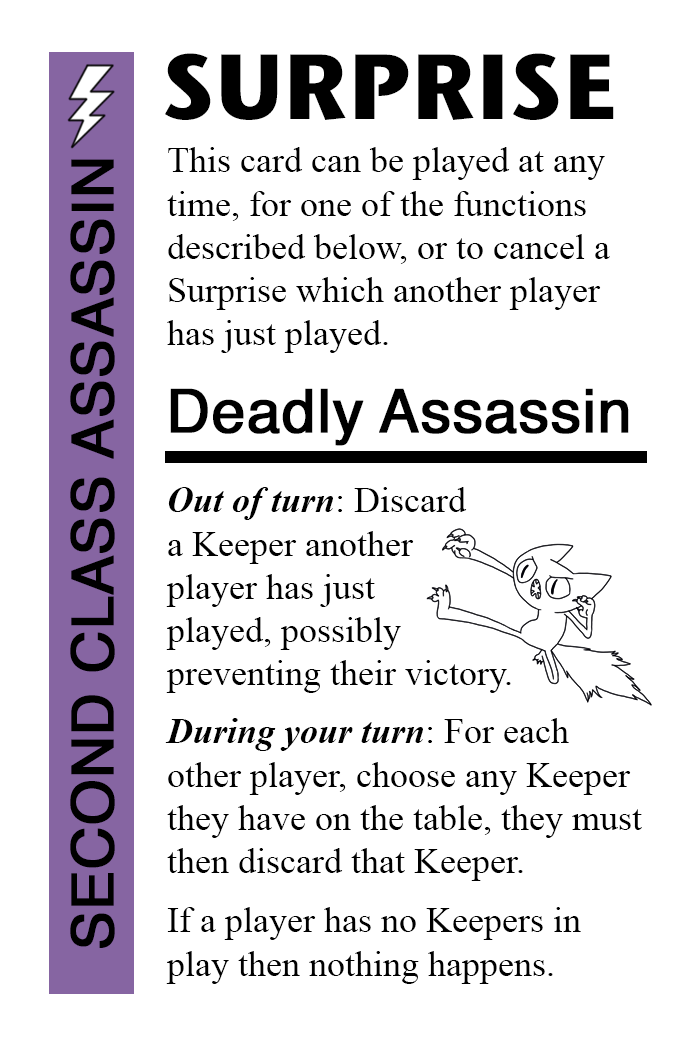
<style>
.page{position:relative;width:700px;height:1042px;background:#ffffff}
.page>*{position:absolute;margin:0}
.t1{font:92px "StoneSansITC-Bold";color:#000000}
.t2{font:36px "TimesNewRomanPSMT";color:#000000}
.t3{font:58px "Helvetica";color:#000000;font-weight:bold}
.t4{font:60px "Helvetica";color:#000000;font-weight:bold}
.t5{font:36px "TimesNewRomanPS-BoldItalicMT";color:#000000}
</style>
<div class="page">
<p class="t1" style="left:165px;top:53px;width:449px;height:67px">SURPRISE</p>
<p class="t2" style="left:167px;top:147px;width:443px;height:206px">This card can be played at any <br>time, for one of the functions<br>described below, or to cancel a<br>Surprise which another player<br>has just played.</p>
<p class="t3" style="left:70px;top:159px;width:45px;height:789px;rotate:-90deg">SECOND CLASS ASSASSIN</p>
<p class="t4" style="left:170px;top:388px;width:459px;height:58px">Deadly Assassin</p>
<p class="t2" style="left:166px;top:487px;width:345px;height:206px"><span class="t5">Out of turn</span>: Discard<br>a Keeper another<br>player has just<br>played, possibly<br>preventing their victory.</p>
<p class="t2" style="left:165px;top:718px;width:477px;height:163px"><span class="t5">During your turn</span>: For each<br>other player, choose any Keeper<br>they have on the table, they must<br>then discard that Keeper.</p>
<p class="t2" style="left:166px;top:907px;width:415px;height:77px">If a player has no Keepers in <br>play then nothing happens.</p>
</div>
